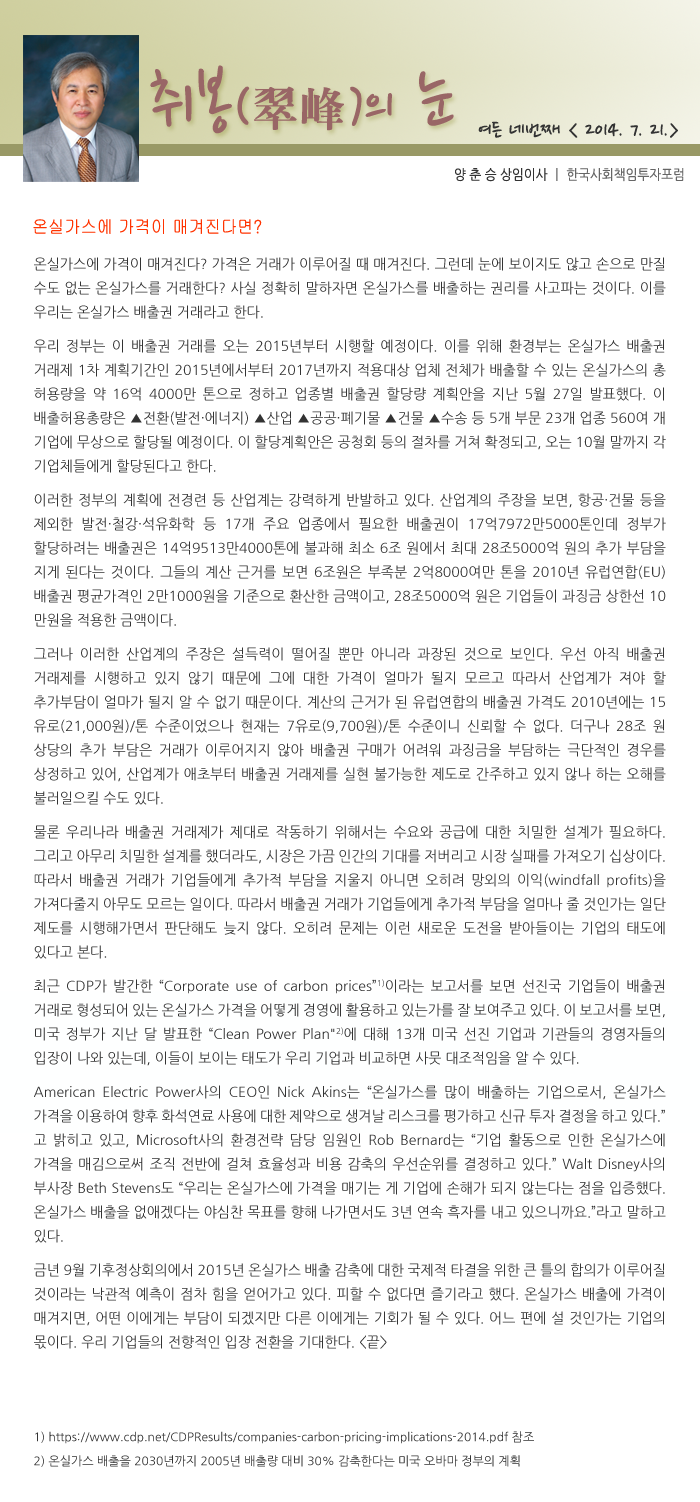
<style>
.page{position:relative;width:700px;height:1502px;background:#ffffff}
.page>*{position:absolute;margin:0}
.t1{font:77.5px "NanumPen";color:#996666}
.t2{font:60px "NanumPen";color:#996666}
.t3{font:48px "H2mjrE";color:#996666}
.t4{font:24px "NanumPen";color:#333333}
.t5{font:14px "NanumGothic";color:#666666;scale:0.9 1}
.t6{font:14px "NanumGothic";color:#333333;scale:0.9 1}
.t7{font:18px "Gulim";color:#ff3300;scale:0.9 1}
.t8{font:14px/24px "NanumGothic";color:#333333}
.t9{font:14px/10px "NanumGothic";color:#333333}
.t10{font:12px/24px "NanumGothic";color:#333333}
</style>
<div class="page">
<p class="t1" style="left:150px;top:65px;width:304px;height:69px">취봉<span class="t2">(</span><span class="t3">翠峰</span><span class="t2">)</span><span class="t2">의</span> 눈</p>
<p class="t4" style="left:478px;top:121px;width:200px;height:17px">여든 네번째 &lt; 2014. 7. 21.&gt;</p>
<p class="t5" style="left:455px;top:168px;width:229px;height:14px"><span class="t6">양 춘 승 상임이사 </span>ㅣ 한국사회책임투자포럼</p>
<p class="t7" style="left:33px;top:219px;width:229px;height:15px">온실가스에 가격이 매겨진다면?</p>
<p class="t8" style="left:34px;top:257px;width:632px;height:1210px;text-align:justify">온실가스에 가격이 매겨진다? 가격은 거래가 이루어질 때 매겨진다. 그런데 눈에 보이지도 않고 손으로 만질 수도 없는 온실가스를 거래한다? 사실 정확히 말하자면 온실가스를 배출하는 권리를 사고파는 것이다. 이를 우리<span class="t9">는 온실가스 배출권 거래라고 한다.<br><br>우리 정부는 이 배출권 거래를 오</span>는 2015년부터 시행할 예정이다. 이를 위해 환경부는 온실가스 배출권 거래제 1차 계획기간인 2015년에서부터 2017년까지 적용대상 업체 전체가 배출할 수 있는 온실가스의 총 허용량을 약 16억 4000만 톤으로 정하고 업종별 배출권 할당량 계획안을 지난 5월 27일 발표했다. 이 배출허용총량은 ▲전환(발전·에너지) ▲산업 ▲공공·폐기물 ▲건물 ▲수송 등 5개 부문 23개 업종 560여 개 기업에 무상으로 할당될 예정이다. 이 할당계획안은 공청회 등의 절차를 거쳐 확정되고, 오는 10월 말까지 각 기업체들에게 할당된<span class="t9">다고 한다.<br><br>이러한 정부의 계획에 전경</span>련 등 산업계는 강력하게 반발하고 있다. 산업계의 주장을 보면, 항공·건물 등을 제외한 발전·철강·석유화학 등 17개 주요 업종에서 필요한 배출권이 17억7972만5000톤인데 정부가 할당하려는 배출권은 14억9513만4000톤에 불과해 최소 6조 원에서 최대 28조5000억 원의 추가 부담을 지게 된다는 것이다. 그들의 계산 근거를 보면 6조원은 부족분 2억8000여만 톤을 2010년 유럽연합(EU) 배출권 평균가격인 2만1000원을 기준으로 환산한 금액이고, 28조5000억 원은 기업들이 과징금 상한선 10만원을 적용<span class="t9">한 금액이다.<br><br>그러나 이러한 산업계의 주장은</span> 설득력이 떨어질 뿐만 아니라 과장된 것으로 보인다. 우선 아직 배출권 거래제를 시행하고 있지 않기 때문에 그에 대한 가격이 얼마가 될지 모르고 따라서 산업계가 져야 할 추가부담이 얼마가 될지 알 수 없기 때문이다. 계산의 근거가 된 유럽연합의 배출권 가격도 2010년에는 15유로(21,000원)/톤 수준이었으나 현재는 7유로(9,700원)/톤 수준이니 신뢰할 수 없다. 더구나 28조 원 상당의 추가 부담은 거래가 이루어지지 않아 배출권 구매가 어려워 과징금을 부담하는 극단적인 경우를 상정하고 있어, 산업계가 애초부터 배출권 거래제를 실현 불가능한 제도로 간주하고 있지 않나 하는 오해를 불러일으<span class="t9">킬 수도 있다.<br><br>물론 우리나라 배출권 거래제가 제</span>대로 작동하기 위해서는 수요와 공급에 대한 치밀한 설계가 필요하다. 그리고 아무리 치밀한 설계를 했더라도, 시장은 가끔 인간의 기대를 저버리고 시장 실패를 가져오기 십상이다. 따라서 배출권 거래가 기업들에게 추가적 부담을 지울지 아니면 오히려 망외의 이익(windfall profits)을 가져다줄지 아무도 모르는 일이다. 따라서 배출권 거래가 기업들에게 추가적 부담을 얼마나 줄 것인가는 일단 제도를 시행해가면서 판단해도 늦지 않다. 오히려 문제는 이런 새로운 도전을 받아들이는 기업의 태도에 있<span class="t9">다고 본다.<br><br>최근 CDP가 발</span>간한 “Corporate use of carbon prices”1)이라는 보고서를 보면 선진국 기업들이 배출권 거래로 형성되어 있는 온실가스 가격을 어떻게 경영에 활용하고 있는가를 잘 보여주고 있다. 이 보고서를 보면, 미국 정부가 지난 달 발표한 “Clean Power Plan"2)에 대해 13개 미국 선진 기업과 기관들의 경영자들의 입장이 나와 있는데, 이들이 보<span class="t9">이는 태도가 우리 기업과 비교하면 사뭇 대조적임을 알 수 있다.<br><br>American Electric Power사의 C</span>EO인 Nick Akins는 “온실가스를 많이 배출하는 기업으로서, 온실가스 가격을 이용하여 향후 화석연료 사용에 대한 제약으로 생겨날 리스크를 평가하고 신규 투자 결정을 하고 있다.”고 밝히고 있고, Microsoft사의 환경전략 담당 임원인 Rob Bernard는 “기업 활동으로 인한 온실가스에 가격을 매김으로써 조직 전반에 걸쳐 효율성과 비용 감축의 우선순위를 결정하고 있다.” Walt Disney사의 부사장 Beth Stevens도 “우리는 온실가스에 가격을 매기는 게 기업에 손해가 되지 않는다는 점을 입증했다. 온실가스 배출을 없애겠다는 야심찬 목표를 향해 나가면서도 3년 연속 흑자를 내고 있으니까요.”라고 말하고 있<span class="t9">다.<br><br>금년 9월 기후정</span>상회의에서 2015년 온실가스 배출 감축에 대한 국제적 타결을 위한 큰 틀의 합의가 이루어질 것이라는 낙관적 예측이 점차 힘을 얻어가고 있다. 피할 수 없다면 즐기라고 했다. 온실가스 배출에 가격이 매겨지면, 어떤 이에게는 부담이 되겠지만 다른 이에게는 기회가 될 수 있다. 어느 편에 설 것인가는 기업의 몫이다. 우리 기업들의 전향적인 입장 전환을 기대한다. &lt;끝&gt;<br><br> <br><br><span class="t10">1) https://www.cdp.net/CDPResults/companies-carbon-pricing-implications-2014.pdf 참조<br>2) 온실가스 배출을 2030년까지 2005년 배출량 대비 30% 감축한다는 미국 오바마 정부의 계획</span></p>
</div>
